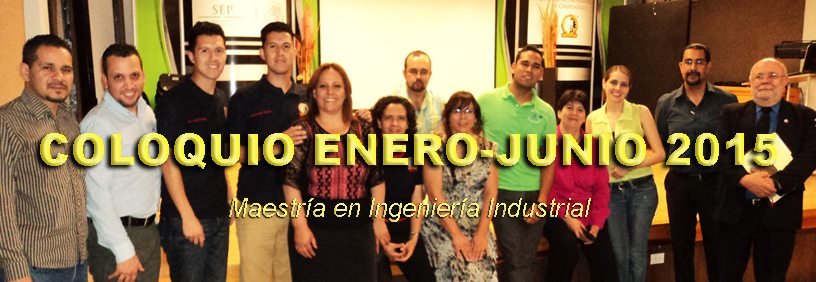
<style>
.page{position:relative;width:816px;height:282px}
.page>*{position:absolute;margin:0}
.t1{font:43.5px "Arial-Black"}
.t2{font:26.2px "Arial-ItalicMT"}
</style>
<div class="page">
<p class="t1" style="left:40px;top:133px;width:737px;height:36px">COLOQUIO ENERO-JUNIO 2015</p>
<p class="t2" style="left:229px;top:198px;width:362px;height:24px">Maestría en Ingeniería Industrial</p>
</div>
